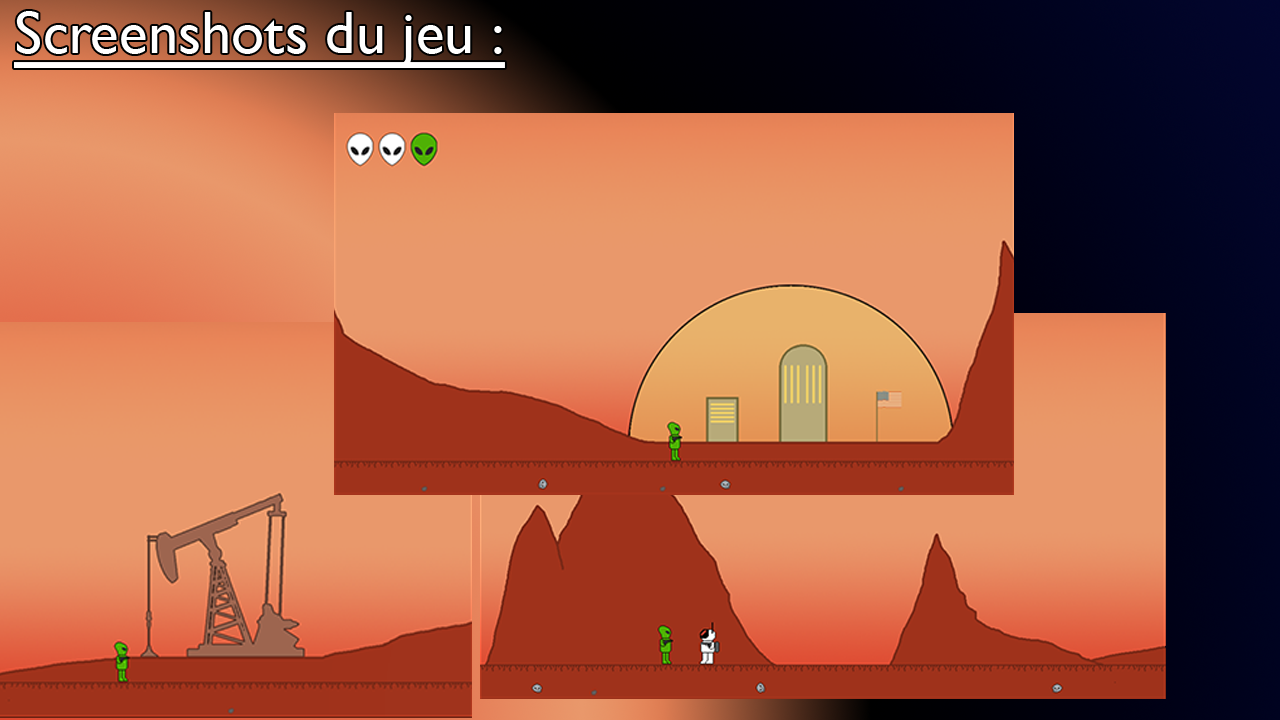
<style>
.page{position:relative;width:1280px;height:720px}
.page>*{position:absolute;margin:0}
.t1{font:60px "GillSansNova";color:#ffffff;text-decoration:underline}
</style>
<div class="page">
<p class="t1" style="left:14px;top:11px;width:491px;height:57px">Screenshots du jeu :</p>
</div>
